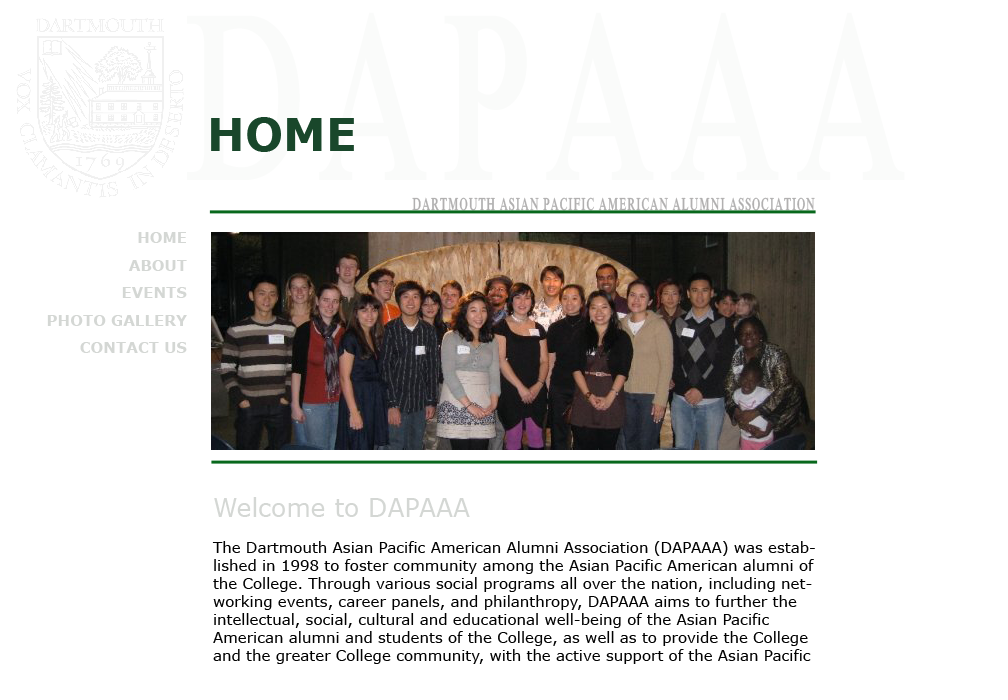
<style>
.page{position:relative;width:1008px;height:700px;background:#ffffff}
.page>*{position:absolute;margin:0}
.t1{font:45px "Verdana-Bold";color:#19472b}
.t2{font:18px "IskoolaPota-Bold";letter-spacing:0.1em;color:#b1b0b0;scale:0.56 1}
.t3{font:15px/27.5px "Verdana-Bold";color:#d4d7d4}
.t4{font:15px "Verdana";color:#010101}
.t5{font:25px "Verdana";color:#d4d7d4}
</style>
<div class="page">
<p class="t1" style="left:211px;top:117px;width:143px;height:35px">HOME</p>
<p class="t2" style="left:412px;top:197px;width:403px;height:14px">DARTMOUTH ASIAN PACIFIC AMERICAN ALUMNI ASSOCIATION</p>
<p class="t3" style="left:47px;top:232px;width:140px;height:121px;text-align:right">HOME<br>ABOUT<br>EVENTS<br>PHOTO GALLERY<br>CONTACT US</p>
<p class="t4" style="left:212px;top:497px;width:603px;height:167px"><span class="t5">Welcome to DAPAAA<br></span><br>The Dartmouth Asian Pacific American Alumni Association (DAPAAA) was established in 1998 to foster community among the Asian Pacific American alumni of the College. Through various social programs all over the nation, including networking events, career panels, and philanthropy, DAPAAA aims to further the intellectual, social, cultural and educational well-being of the Asian Pacific American alumni and students of the College, as well as to provide the College and the greater College community, with the active support of the Asian Pacific American alumni in matters of mutual concern.</p>
</div>
